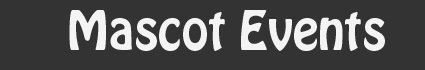
<style>
.page{position:relative;width:425px;height:70px;background:#333333}
.page>*{position:absolute;margin:0}
.t1{font:48px "HoboStd";color:#f4f4f4}
</style>
<div class="page">
<p class="t1" style="left:69px;top:10px;width:316px;height:41px">Mascot Events</p>
</div>
